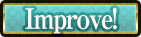
<style>
.page{position:relative;width:141px;height:37px}
.page>*{position:absolute;margin:0}
.t1{font:28px "RyuminPro-ExBold";letter-spacing:-0.08em;color:#fff6f2;scale:0.9 1}
</style>
<div class="page">
<p class="t1" style="left:25px;top:7px;width:92px;height:27px">Improve!</p>
</div>
